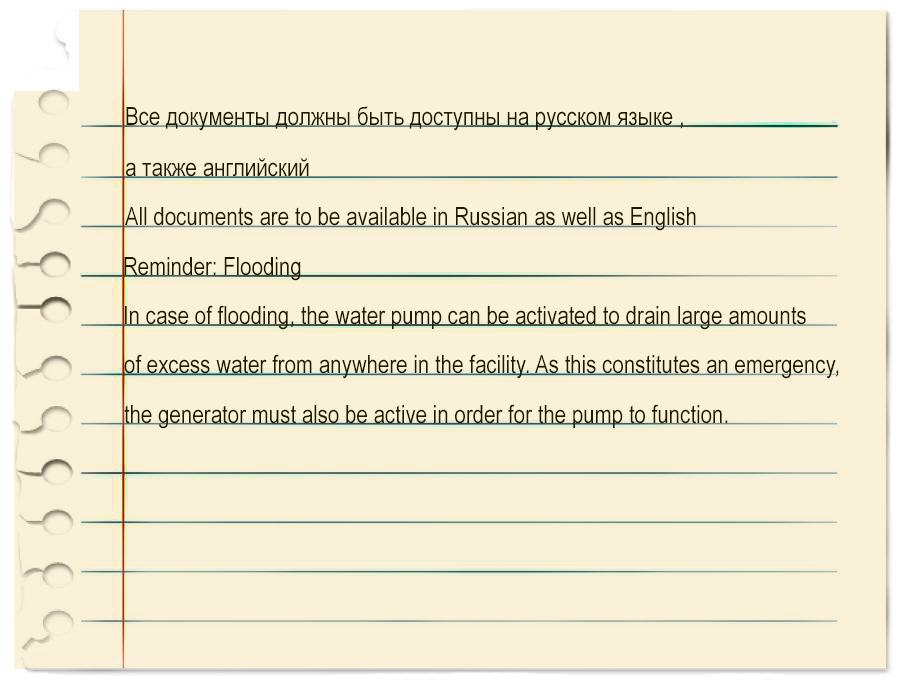
<style>
.page{position:relative;width:900px;height:684px;background:#faf1d9}
.page>*{position:absolute;margin:0}
.t1{font:25px "ArialNarrow";color:#211800}
</style>
<div class="page">
<p class="t1" style="left:126px;top:106px;width:557px;height:25px">Все документы должны быть доступны на русском языке ,</p>
<p class="t1" style="left:126px;top:158px;width:183px;height:19px">а также английский</p>
<p class="t1" style="left:125px;top:207px;width:571px;height:24px">All documents are to be available in Russian as well as English</p>
<p class="t1" style="left:124px;top:257px;width:177px;height:24px">Reminder: Flooding</p>
<p class="t1" style="left:125px;top:305px;width:681px;height:25px">In case of flooding, the water pump can be activated to drain large amounts</p>
<p class="t1" style="left:124px;top:354px;width:715px;height:25px">of excess water from anywhere in the facility. As this constitutes an emergency,</p>
<p class="t1" style="left:124px;top:404px;width:604px;height:25px">the generator must also be active in order for the pump to function.</p>
</div>
